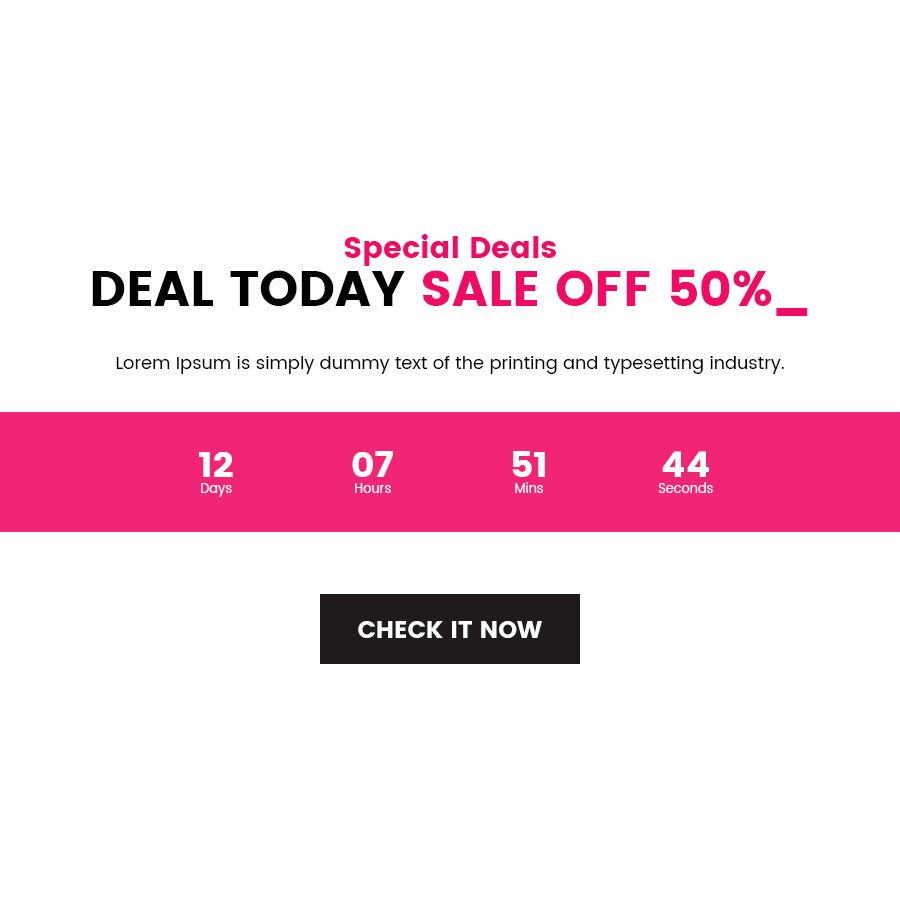
<style>
.page{position:relative;width:900px;height:900px;background:#ffffff}
.page>*{position:absolute;margin:0}
.t1{font:30px "Poppins";color:#f00c66}
.t2{font:50px "Poppins";color:#f00c66;text-transform:uppercase}
.t3{font:50px "Poppins";color:#040203;text-transform:uppercase}
.t4{font:18px "Poppins-Regular";color:#040203}
.t5{font:13px "Poppins-Regular";color:#ffffff}
.t6{font:36px/21px "Poppins";color:#ffffff;text-transform:uppercase}
.t7{font:24px "Poppins";color:#ffffff;text-transform:uppercase}
</style>
<div class="page">
<p class="t1" style="left:344px;top:234px;width:212px;height:32px">Special Deals</p>
<p class="t2" style="left:92px;top:269px;width:716px;height:47px"><span class="t3">deal today </span>sale off 50%_</p>
<p class="t4" style="left:116px;top:356px;width:668px;height:18px">Lorem Ipsum is simply dummy text of the printing and typesetting industry.</p>
<p class="t5" style="left:199px;top:452px;width:34px;height:45px;text-align:center"><span class="t6">12<br></span>Days</p>
<p class="t5" style="left:352px;top:451px;width:41px;height:42px;text-align:center"><span class="t6">07<br></span>Hours</p>
<p class="t5" style="left:512px;top:451px;width:33px;height:42px;text-align:center"><span class="t6">51<br></span>Mins</p>
<p class="t5" style="left:658px;top:451px;width:55px;height:42px;text-align:center"><span class="t6">44<br></span>Seconds</p>
<p class="t7" style="left:358px;top:621px;width:184px;height:17px">check it now</p>
</div>
